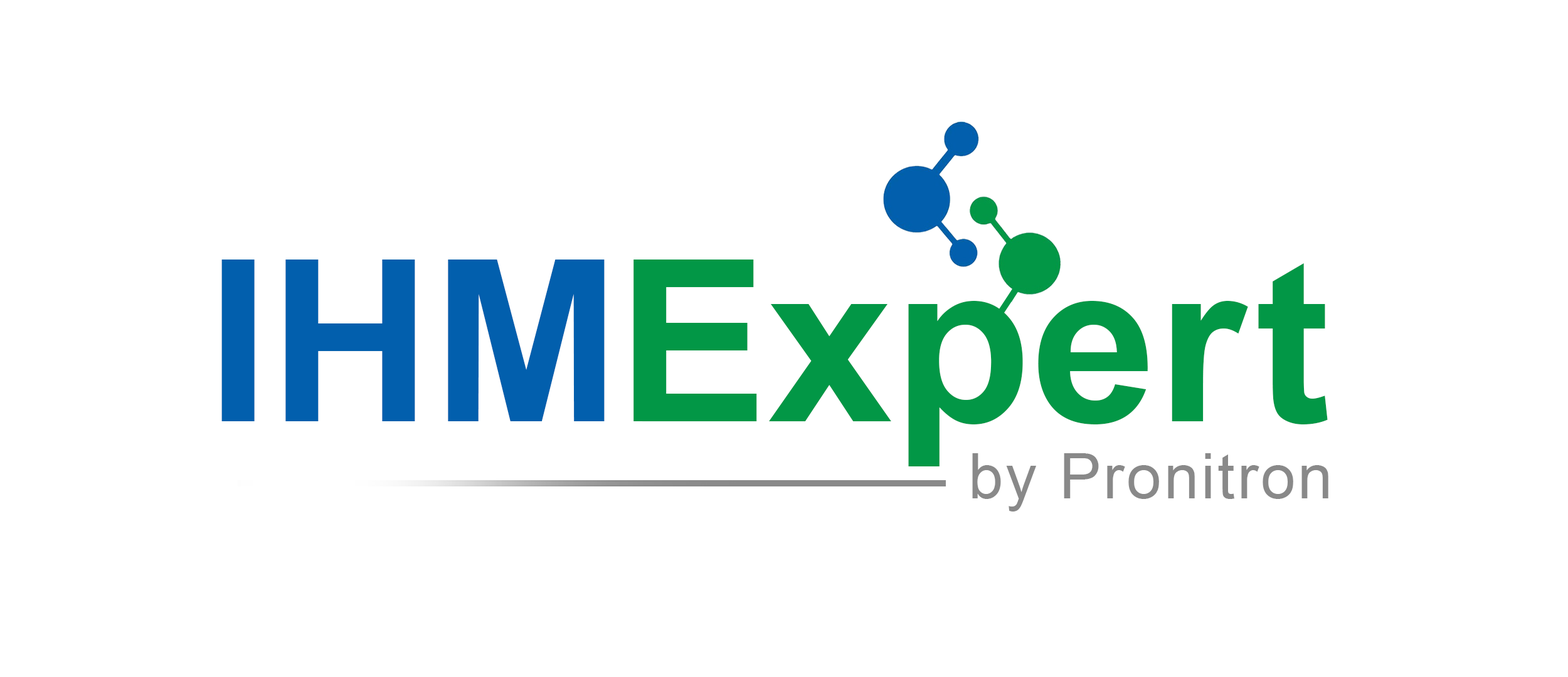
<style>
.page{position:relative;width:1568px;height:677px;background:#ffffff}
.page>*{position:absolute;margin:0}
.t1{font:225.8px "Arial-BoldMT";color:#025fad}
.t2{font:225.8px "Arial-BoldMT";color:#029746}
.t3{font:62.7px "ArialMT";letter-spacing:0.038em;color:#898989}
</style>
<div class="page">
<p class="t1" style="left:221px;top:260px;width:384px;height:161px">IHM</p>
<p class="t2" style="left:633px;top:260px;width:695px;height:207px">Exper t</p>
<p class="t3" style="left:972px;top:453px;width:356px;height:59px">by Pronitron</p>
</div>
